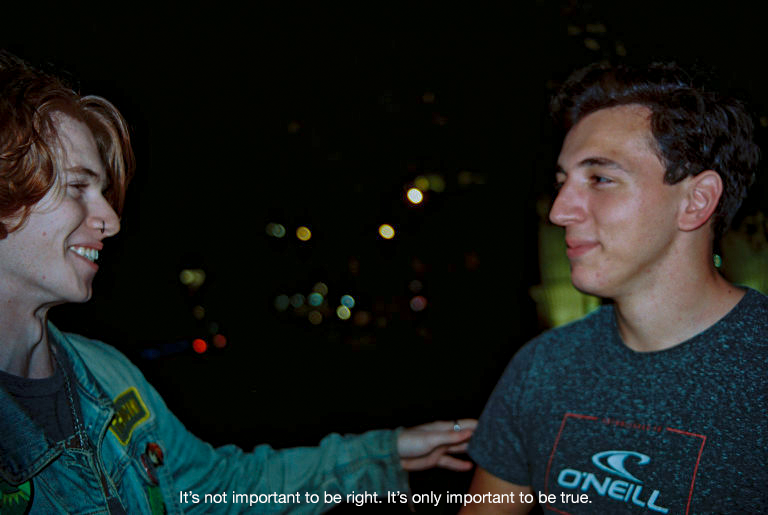
<style>
.page{position:relative;width:768px;height:515px}
.page>*{position:absolute;margin:0}
.t1{font:16px "HelveticaNeue";color:#ffffff}
</style>
<div class="page">
<p class="t1" style="left:180px;top:491px;width:412px;height:15px">It’s not important to be right. It’s only important to be true.</p>
</div>
